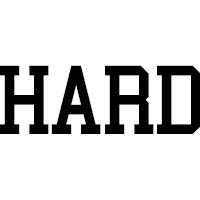
<style>
.page{position:relative;width:200px;height:200px;background:#ffffff}
.page>*{position:absolute;margin:0}
.t1{font:99.7px "College";letter-spacing:-0.06em;color:#000000}
</style>
<div class="page">
<p class="t1" style="left:0px;top:65px;width:201px;height:69px">HARD</p>
</div>
